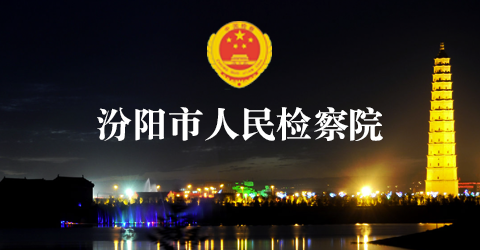
<style>
.page{position:relative;width:480px;height:250px}
.page>*{position:absolute;margin:0}
.t1{font:36px "STSongti-SC-Black";color:#ffffff}
</style>
<div class="page">
<p class="t1" style="left:97px;top:107px;width:286px;height:34px">汾阳市人民检察院</p>
</div>
